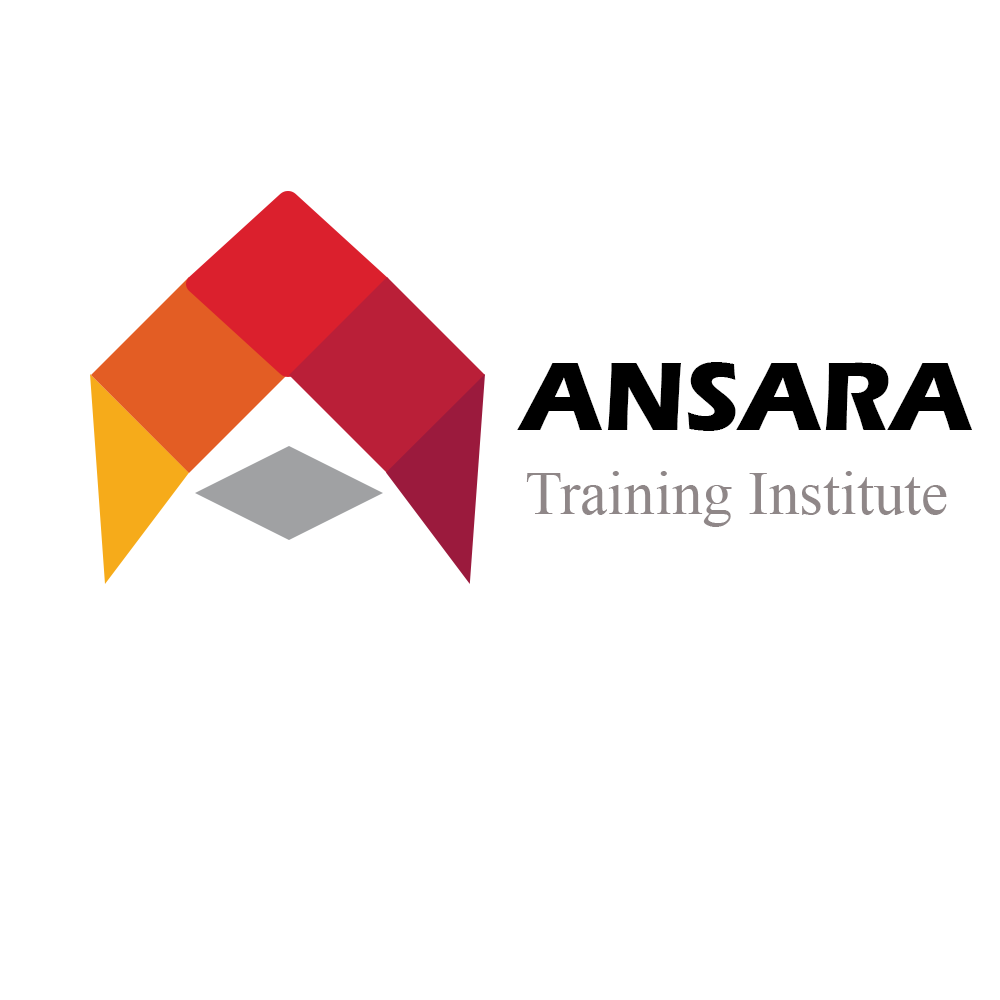
<style>
.page{position:relative;width:1000px;height:1000px;background:#ffffff}
.page>*{position:absolute;margin:0}
.t1{font:100px "ErasITC-Bold";color:#000000}
.t2{font:61.1px "TimesNewRomanPSMT";color:#8f8788}
</style>
<div class="page">
<p class="t1" style="left:517px;top:362px;width:455px;height:69px">ANSARA</p>
<p class="t2" style="left:526px;top:471px;width:421px;height:56px">Training Institute</p>
</div>
